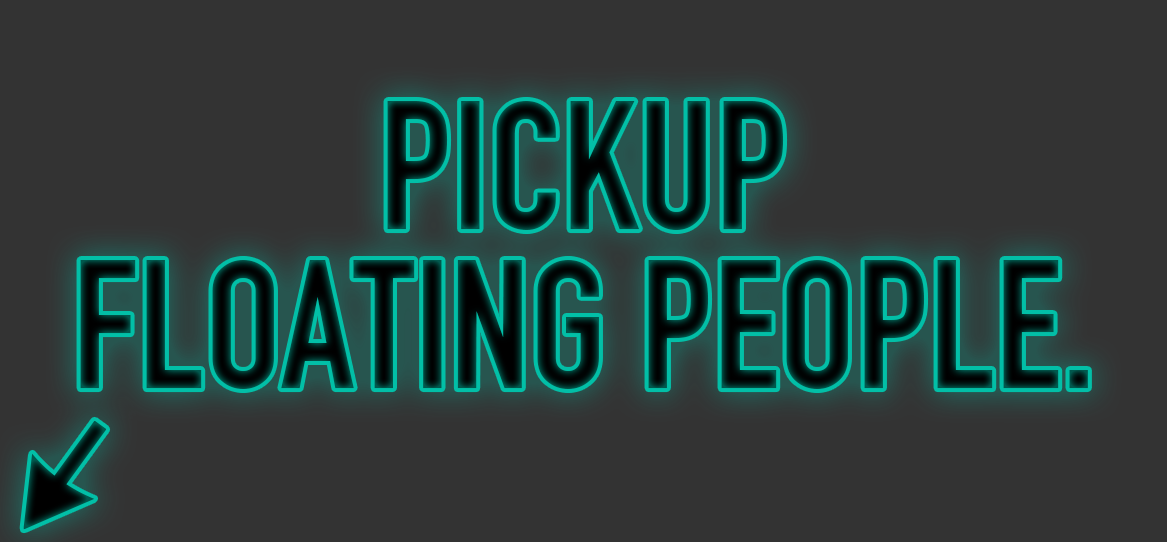
<style>
.page{position:relative;width:1167px;height:542px;background:#333333}
.page>*{position:absolute;margin:0}
.t1{font:179.5px/158.4px "DINEngschrift";text-transform:uppercase}
</style>
<div class="page">
<p class="t1" style="left:80px;top:101px;width:1008px;height:288px;text-align:center">Pickup <br>Floating People.</p>
</div>
